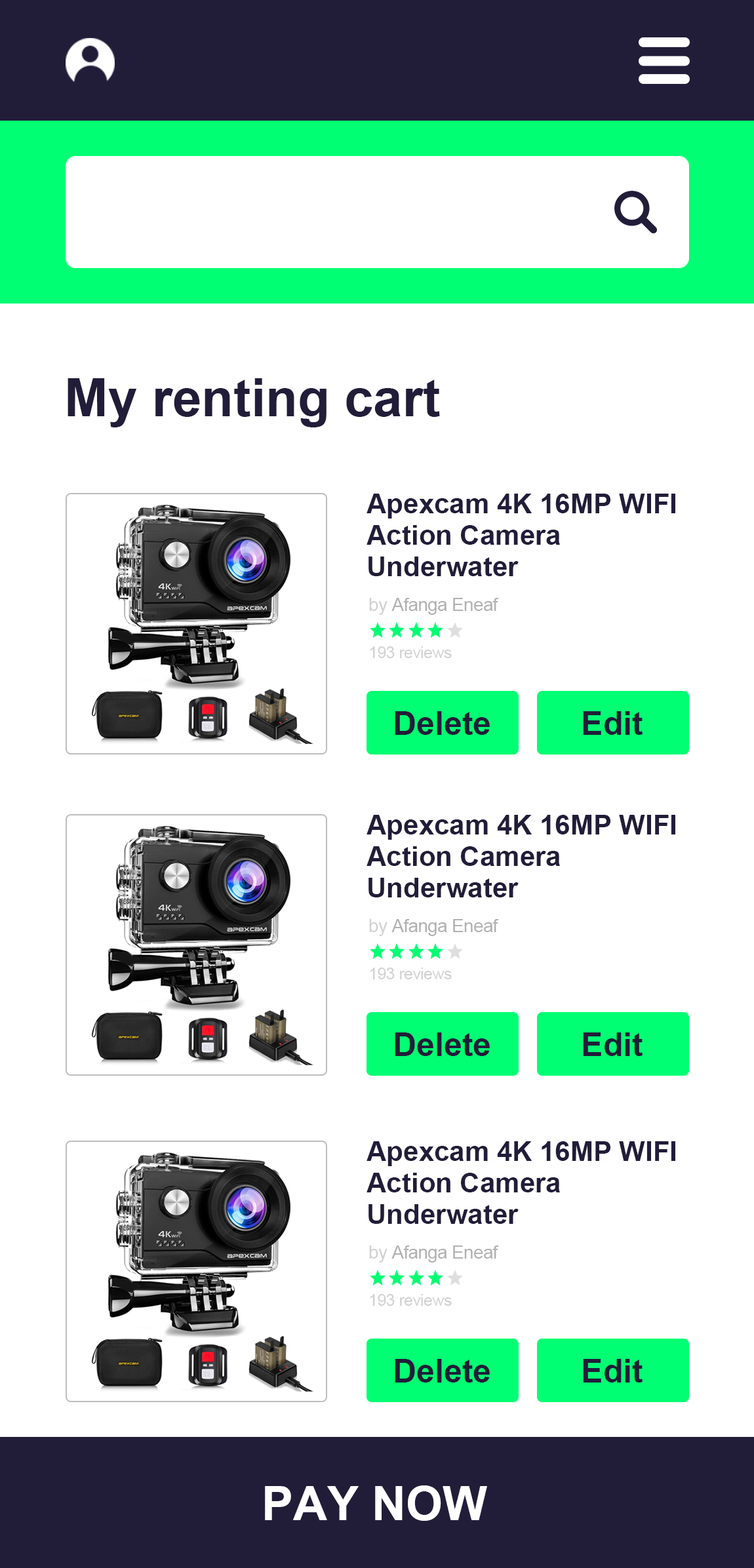
<style>
.page{position:relative;width:754px;height:1568px;background:#ffffff}
.page>*{position:absolute;margin:0}
.t1{font:52.4px "Arial-BoldMT";color:#211d39}
.t2{font:27.5px/31.5px "Arial-BoldMT";color:#211d39}
.t3{font:18.4px "ArialMT";letter-spacing:-0.025em;color:#b1b1b1}
.t4{font:18.4px "ArialMT";letter-spacing:-0.025em;color:#d1d1d1}
.t5{font:16.4px "ArialMT";letter-spacing:-0.025em;color:#d1d1d1}
.t6{font:32.8px "Arial-BoldMT";color:#211d39}
.t7{font:47.2px "Arial-BoldMT";color:#ffffff}
</style>
<div class="page">
<p class="t1" style="left:68px;top:378px;width:372px;height:49px">My renting cart</p>
<p class="t2" style="left:366px;top:494px;width:309px;height:82px">Apexcam 4K 16MP WIFI <br>Action Camera <br>Underwater</p>
<p class="t3" style="left:369px;top:598px;width:130px;height:17px"><span class="t4">by </span>Afanga Eneaf</p>
<p class="t5" style="left:370px;top:646px;width:82px;height:12px">193 reviews</p>
<p class="t6" style="left:395px;top:711px;width:95px;height:24px">Delete</p>
<p class="t6" style="left:583px;top:711px;width:59px;height:24px">Edit</p>
<p class="t2" style="left:366px;top:815px;width:309px;height:82px">Apexcam 4K 16MP WIFI <br>Action Camera <br>Underwater</p>
<p class="t3" style="left:369px;top:919px;width:130px;height:17px"><span class="t4">by </span>Afanga Eneaf</p>
<p class="t5" style="left:370px;top:968px;width:82px;height:11px">193 reviews</p>
<p class="t6" style="left:395px;top:1032px;width:95px;height:24px">Delete</p>
<p class="t6" style="left:583px;top:1032px;width:59px;height:24px">Edit</p>
<p class="t2" style="left:366px;top:1141px;width:309px;height:83px">Apexcam 4K 16MP WIFI <br>Action Camera <br>Underwater</p>
<p class="t3" style="left:369px;top:1245px;width:130px;height:18px"><span class="t4">by </span>Afanga Eneaf</p>
<p class="t5" style="left:370px;top:1294px;width:82px;height:12px">193 reviews</p>
<p class="t6" style="left:395px;top:1359px;width:95px;height:23px">Delete</p>
<p class="t6" style="left:583px;top:1359px;width:59px;height:23px">Edit</p>
<p class="t7" style="left:265px;top:1485px;width:222px;height:36px">PAY NOW</p>
</div>
